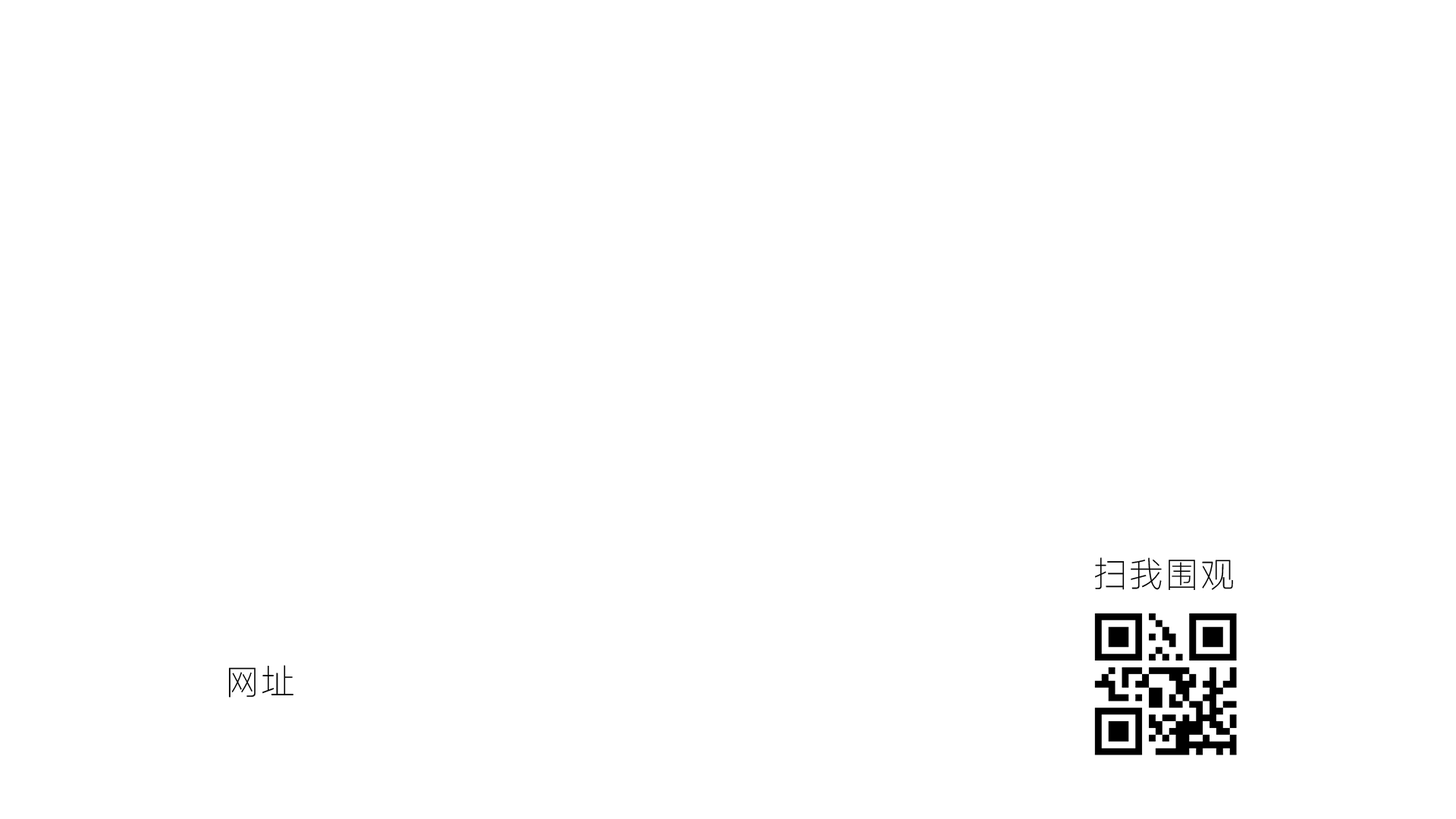
<style>
.page{position:relative;width:1456px;height:819px;background:#ffffff}
.page>*{position:absolute;margin:0}
.t1{font:35.6px "MiSans-ExtraLight";color:#000000}
</style>
<div class="page">
<p class="t1" style="left:1095px;top:557px;width:138px;height:33px">扫我围观</p>
<p class="t1" style="left:228px;top:665px;width:65px;height:33px">网址</p>
</div>
